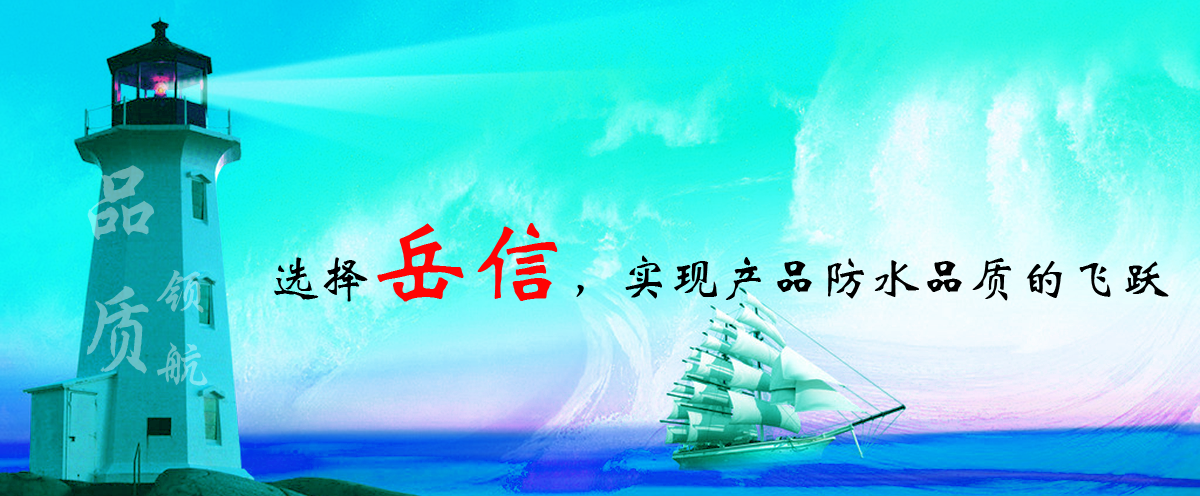
<style>
.page{position:relative;width:1200px;height:496px}
.page>*{position:absolute;margin:0}
.t1{font:100px "FZXKJW--GB1-0";color:#66bdc2}
.t2{font:50px "STXinwei";color:#000000}
.t3{font:100px "STXinwei";color:#fe0404}
.t4{font:56px "FZXKJW--GB1-0"}
</style>
<div class="page">
<p class="t1" style="left:86px;top:165px;width:68px;height:209px">品 质</p>
<p class="t2" style="left:274px;top:223px;width:895px;height:79px">选择<span class="t3">岳信</span>，实现产品防水品质的飞跃</p>
<p class="t4" style="left:156px;top:270px;width:52px;height:116px">领 航</p>
</div>
